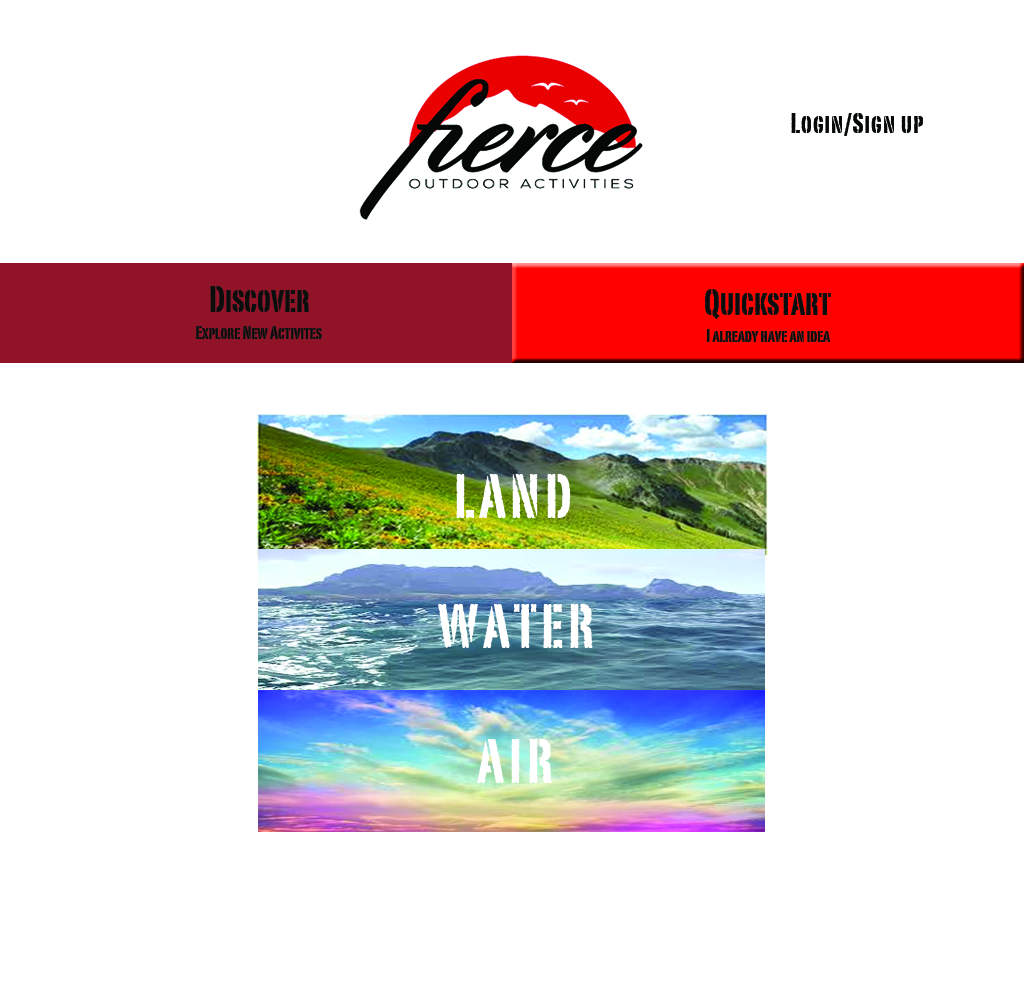
<style>
.page{position:relative;width:1024px;height:998px;background:#ffffff}
.page>*{position:absolute;margin:0}
.t1{font:28px "PortagoITCTT";letter-spacing:0.04em;color:#060808}
.t2{font:36px "PortagoITCTT";color:#0b0d0d}
.t3{font:30px "PortagoITCTT";color:#0b0d0d}
.t4{font:18px "PortagoITCTT";color:#0b0d0d}
.t5{font:60px "PortagoITCTT";letter-spacing:0.08em;color:#ffffff;text-transform:uppercase}
</style>
<div class="page">
<p class="t1" style="left:791px;top:113px;width:132px;height:23px">Login/Sign up</p>
<p class="t2" style="left:210px;top:286px;width:99px;height:26px"><span class="t3"> </span>  Discover</p>
<p class="t2" style="left:705px;top:289px;width:126px;height:30px">Quickstart</p>
<p class="t4" style="left:196px;top:326px;width:126px;height:13px">Explore New Activites</p>
<p class="t4" style="left:706px;top:329px;width:124px;height:13px">I already have an idea</p>
<p class="t5" style="left:456px;top:474px;width:115px;height:44px">Land</p>
<p class="t5" style="left:438px;top:604px;width:155px;height:44px">Water</p>
<p class="t5" style="left:477px;top:739px;width:75px;height:44px">AIR</p>
</div>
